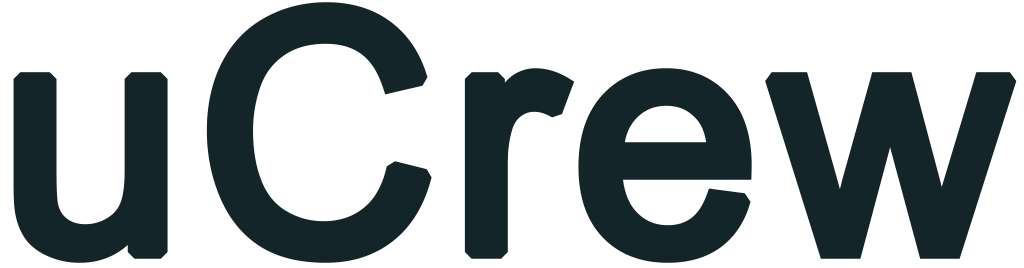
<style>
.page{position:relative;width:1024px;height:268px;background:#ffffff}
.page>*{position:absolute;margin:0}
.t1{font:333.5px "ArialMT";letter-spacing:0.01em;color:#14252a;font-weight:bold}
</style>
<div class="page">
<p class="t1" style="left:13px;top:2px;width:1004px;height:261px">uCrew</p>
</div>
